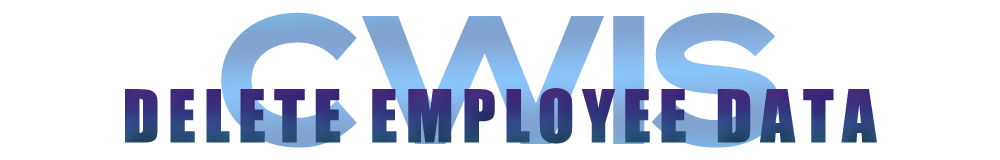
<style>
.page{position:relative;width:1000px;height:160px;background:#ffffff}
.page>*{position:absolute;margin:0}
.t1{font:161.1px "Bristone";letter-spacing:-0.04em}
.t2{font:66.7px "Impact";letter-spacing:0.1em;color:#323a7b;font-weight:bold}
</style>
<div class="page">
<p class="t1" style="left:221px;top:12px;width:559px;height:136px">cwis</p>
<p class="t2" style="left:125px;top:88px;width:752px;height:56px">DELETE EMPLOYEE DATA</p>
</div>
